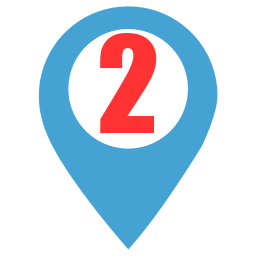
<style>
.page{position:relative;width:256px;height:256px;background:#ffffff}
.page>*{position:absolute;margin:0}
.t1{font:123.9px "Impact";color:#ff3333}
</style>
<div class="page">
<p class="t1" style="left:100px;top:33px;width:57px;height:100px">2</p>
</div>
